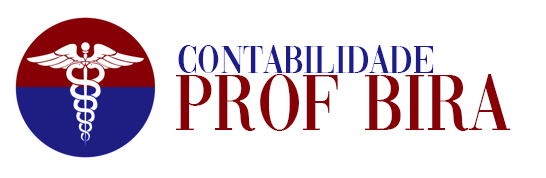
<style>
.page{position:relative;width:546px;height:178px;background:#ffffff}
.page>*{position:absolute;margin:0}
.t1{font:41.2px "Vogue-Regular";color:#1e1e82;scale:0.91 1}
.t2{font:82.5px "Vogue-Regular";color:#870006;scale:0.91 1}
.t3{font:82.5px "Vogue-Regular";color:#ffffff;scale:0.91 1}
</style>
<div class="page">
<p class="t1" style="left:178px;top:45px;width:256px;height:28px">CONTABILIDADE</p>
<p class="t2" style="left:176px;top:74px;width:335px;height:57px">PROF<span class="t3">i</span>BIRA</p>
</div>
